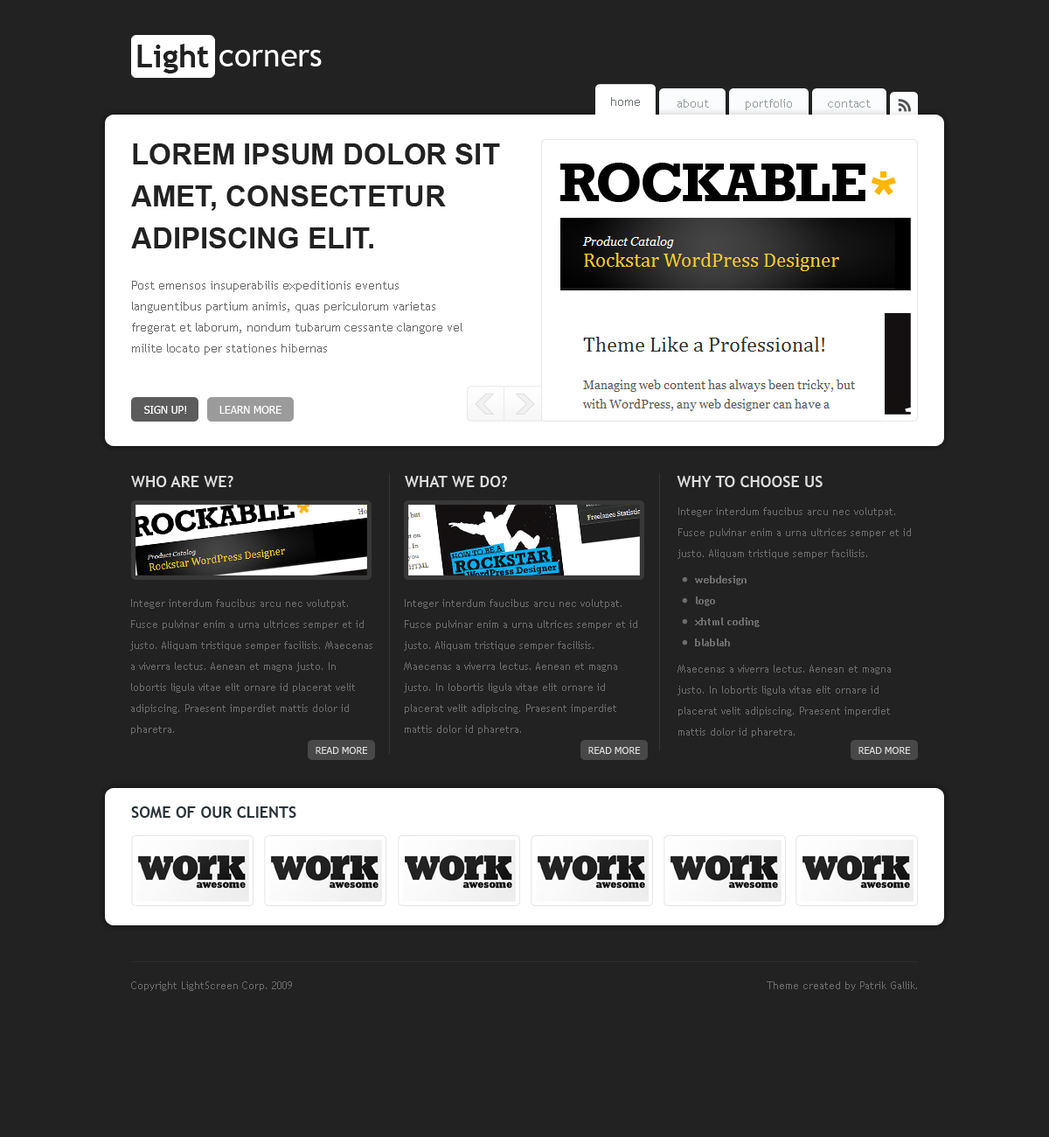
<style>
.page{position:relative;width:1049px;height:1137px;background:#222222}
.page>*{position:absolute;margin:0}
.t1{font:31.5px "TrebuchetMS-Bold";color:#222222}
.t2{font:31.5px "TrebuchetMS";color:#ffffff}
.t3{font:12.2px "TrebuchetMS";color:#707577}
.t4{font:12.2px "TrebuchetMS";color:#969da1}
.t5{font:28.9px/42px "Arial-BoldMT";color:#222222;text-transform:uppercase}
.t6{font:12.2px/21px "TrebuchetMS";color:#686868}
.t7{font:10.5px "Tahoma";color:#ffffff;text-transform:uppercase}
.t8{font:15.7px "TrebuchetMS-Bold";color:#dddddd}
.t9{font:15.7px "TrebuchetMS-Bold";color:#dddddd;text-transform:uppercase}
.t10{font:10.5px/21px "TrebuchetMS";color:#6d6d6d}
.t11{font:10.5px/21px "TrebuchetMS-Bold";color:#6d6d6d}
.t12{font:9.6px "Tahoma";color:#dbdbdb;text-transform:uppercase}
.t13{font:15.7px "TrebuchetMS-Bold";color:#2b3438;text-transform:uppercase}
.t14{font:10.5px "TrebuchetMS";color:#6d6d6d}
</style>
<div class="page">
<p class="t1" style="left:137px;top:44px;width:72px;height:29px">Light</p>
<p class="t2" style="left:219px;top:50px;width:103px;height:16px">corners</p>
<p class="t3" style="left:611px;top:97px;width:29px;height:9px">home</p>
<p class="t4" style="left:678px;top:99px;width:31px;height:9px">about</p>
<p class="t4" style="left:746px;top:99px;width:46px;height:11px">portfolio</p>
<p class="t4" style="left:828px;top:100px;width:43px;height:8px">contact</p>
<p class="t5" style="left:131px;top:143px;width:369px;height:105px">Lorem ipsum dolor sit amet, consectetur adipiscing elit.</p>
<p class="t6" style="left:132px;top:281px;width:330px;height:74px">Post emensos insuperabilis expeditionis eventus languentibus partium animis, quas periculorum varietas fregerat et laborum, nondum tubarum cessante clangore vel milite locato per stationes hibernas</p>
<p class="t7" style="left:144px;top:406px;width:42px;height:8px">sign up!</p>
<p class="t7" style="left:219px;top:406px;width:63px;height:8px">learn more</p>
<p class="t8" style="left:131px;top:476px;width:102px;height:11px">WHO ARE WE?</p>
<p class="t9" style="left:405px;top:476px;width:102px;height:11px">what we do?</p>
<p class="t9" style="left:677px;top:476px;width:146px;height:11px">whY to choose us</p>
<p class="t10" style="left:678px;top:507px;width:233px;height:230px">Integer interdum faucibus arcu nec volutpat. Fusce pulvinar enim a urna ultrices semper et id justo. Aliquam tristique semper facilisis.<br><br><span class="t11">     webdesign<br>     logo<br>     xhtml coding<br>     blablah<br><br></span>Maecenas a viverra lectus. Aenean et magna justo. In lobortis ligula vitae elit ornare id placerat velit adipiscing. Praesent imperdiet mattis dolor id pharetra.</p>
<p class="t10" style="left:130px;top:599px;width:242px;height:135px">Integer interdum faucibus arcu nec volutpat. Fusce pulvinar enim a urna ultrices semper et id justo. Aliquam tristique semper facilisis. Maecenas a viverra lectus. Aenean et magna justo. In lobortis ligula vitae elit ornare id placerat velit adipiscing. Praesent imperdiet mattis dolor id pharetra.</p>
<p class="t10" style="left:404px;top:599px;width:233px;height:135px">Integer interdum faucibus arcu nec volutpat. Fusce pulvinar enim a urna ultrices semper et id justo. Aliquam tristique semper facilisis. Maecenas a viverra lectus. Aenean et magna justo. In lobortis ligula vitae elit ornare id placerat velit adipiscing. Praesent imperdiet mattis dolor id pharetra.</p>
<p class="t12" style="left:316px;top:747px;width:52px;height:7px">READ MORE</p>
<p class="t12" style="left:588px;top:747px;width:53px;height:7px">READ MORE</p>
<p class="t12" style="left:859px;top:747px;width:52px;height:7px">READ MORE</p>
<p class="t13" style="left:131px;top:806px;width:165px;height:11px">SOME OF OUR CLIENTS</p>
<p class="t14" style="left:131px;top:981px;width:161px;height:10px">Copyright LightScreen Corp. 2009</p>
<p class="t14" style="left:767px;top:981px;width:150px;height:10px">Theme created by Patrik Gallik.</p>
</div>
